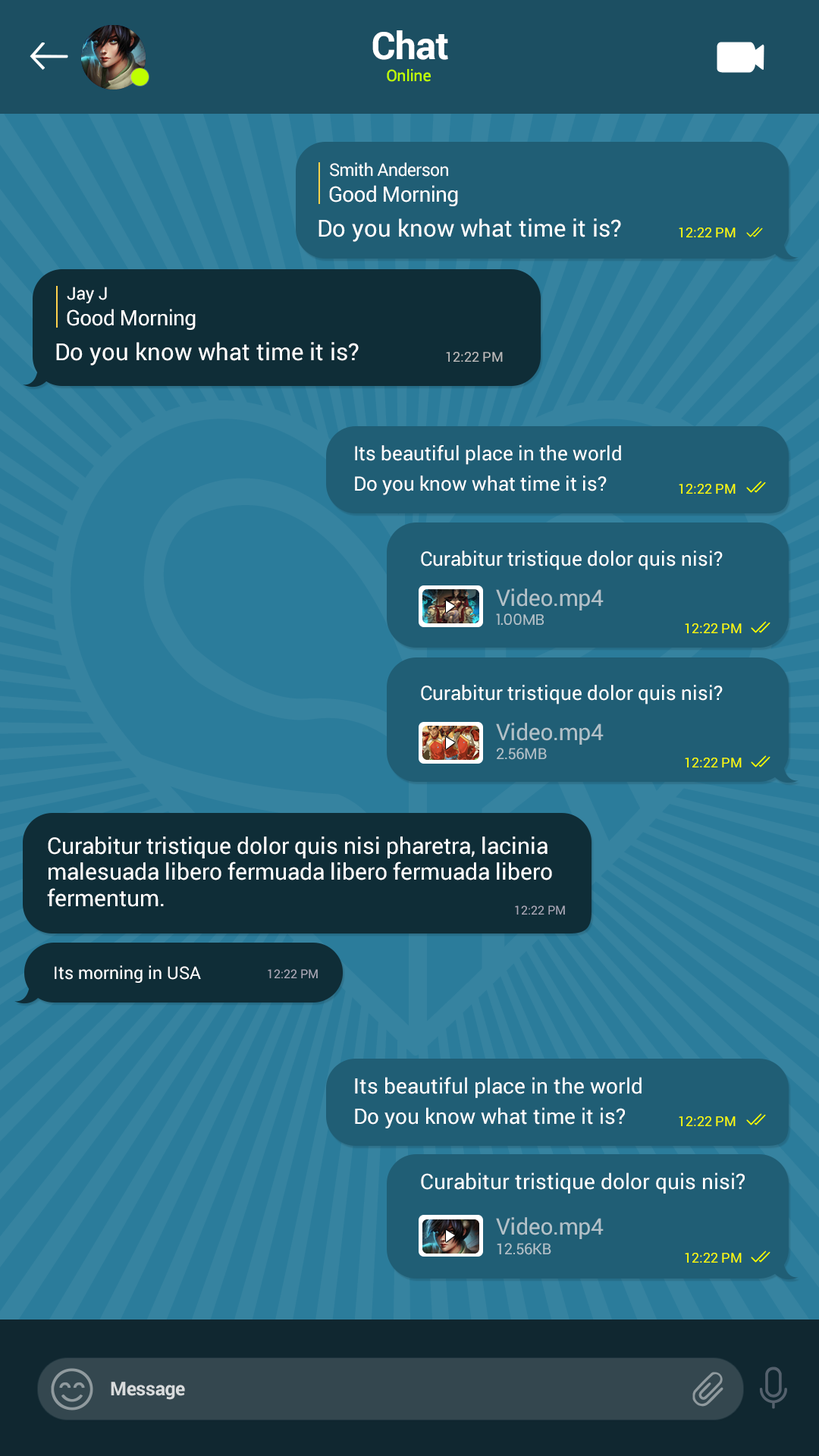
<style>
.page{position:relative;width:819px;height:1456px;background:#2b7c9b}
.page>*{position:absolute;margin:0}
.t1{font:37.9px "Roboto-Bold";letter-spacing:-0.013em;color:#ffffff}
.t2{font:15.9px "Roboto-Regular";color:#bfff00}
.t3{font:17.4px "Roboto-Regular";letter-spacing:-0.025em;color:#ffffff}
.t4{font:21.2px "Roboto-Regular";letter-spacing:-0.025em;color:#ffffff}
.t5{font:23.5px "Roboto-Regular";color:#ffffff}
.t6{font:13.6px "Roboto-Regular";color:#ffff00}
.t7{font:13.6px "Roboto-Regular";color:#bbbbbb}
.t8{font:19.7px "Roboto-Regular";color:#ffffff}
.t9{font:22.7px "Roboto-Regular";letter-spacing:-0.013em;color:#b2c1c8}
.t10{font:15.2px "Poppins-Regular";letter-spacing:-0.013em;color:#b2c1c8}
.t11{font:15.2px "Roboto-Regular";letter-spacing:-0.013em;color:#b2c1c8}
.t12{font:22.7px/26.2px "Roboto-Regular";color:#ffffff}
.t13{font:12.1px "Roboto-Regular";color:#a8a8b7}
.t14{font:17.4px "Roboto-Regular";color:#ffffff}
.t15{font:21.2px "Roboto-Regular";color:#ffffff}
.t16{font:19px "Roboto-Bold";letter-spacing:-0.013em;color:#d8dbdc}
</style>
<div class="page">
<p class="t1" style="left:372px;top:30px;width:76px;height:30px">Chat</p>
<p class="t2" style="left:387px;top:69px;width:44px;height:13px">Online</p>
<p class="t3" style="left:330px;top:162px;width:118px;height:15px">Smith Anderson</p>
<p class="t4" style="left:329px;top:185px;width:129px;height:21px">Good Morning</p>
<p class="t5" style="left:318px;top:218px;width:303px;height:24px">Do you know what time it is?</p>
<p class="t6" style="left:679px;top:227px;width:57px;height:10px">12:22 PM</p>
<p class="t3" style="left:67px;top:287px;width:40px;height:16px">Jay J</p>
<p class="t4" style="left:67px;top:309px;width:129px;height:21px">Good Morning</p>
<p class="t5" style="left:56px;top:342px;width:303px;height:24px">Do you know what time it is?</p>
<p class="t7" style="left:446px;top:352px;width:57px;height:10px">12:22 PM</p>
<p class="t8" style="left:355px;top:445px;width:266px;height:20px">Its beautiful place in the world</p>
<p class="t8" style="left:355px;top:475px;width:252px;height:20px">Do you know what time it is?</p>
<p class="t6" style="left:679px;top:484px;width:57px;height:10px">12:22 PM</p>
<p class="t8" style="left:421px;top:551px;width:302px;height:19px">Curabitur tristique dolor quis nisi?</p>
<p class="t9" style="left:496px;top:588px;width:108px;height:22px">Video.mp4</p>
<p class="t10" style="left:496px;top:613px;width:48px;height:12px">1.00MB</p>
<p class="t6" style="left:685px;top:623px;width:57px;height:10px">12:22 PM</p>
<p class="t8" style="left:421px;top:685px;width:302px;height:19px">Curabitur tristique dolor quis nisi?</p>
<p class="t9" style="left:496px;top:723px;width:108px;height:22px">Video.mp4</p>
<p class="t11" style="left:497px;top:748px;width:50px;height:12px">2.56MB</p>
<p class="t6" style="left:685px;top:758px;width:57px;height:9px">12:22 PM</p>
<p class="t12" style="left:47px;top:836px;width:505px;height:71px">Curabitur tristique dolor quis nisi pharetra, lacinia malesuada libero fermuada libero fermuada libero fermentum.</p>
<p class="t13" style="left:515px;top:905px;width:50px;height:10px">12:22 PM</p>
<p class="t14" style="left:55px;top:965px;width:146px;height:18px">Its morning in USA</p>
<p class="t13" style="left:268px;top:969px;width:50px;height:9px">12:22 PM</p>
<p class="t15" style="left:355px;top:1077px;width:287px;height:21px">Its beautiful place in the world</p>
<p class="t15" style="left:355px;top:1107px;width:270px;height:21px">Do you know what time it is?</p>
<p class="t6" style="left:679px;top:1116px;width:57px;height:10px">12:22 PM</p>
<p class="t15" style="left:421px;top:1172px;width:324px;height:22px">Curabitur tristique dolor quis nisi?</p>
<p class="t9" style="left:496px;top:1217px;width:108px;height:22px">Video.mp4</p>
<p class="t11" style="left:497px;top:1243px;width:54px;height:12px">12.56KB</p>
<p class="t6" style="left:685px;top:1253px;width:57px;height:10px">12:22 PM</p>
<p class="t16" style="left:111px;top:1382px;width:74px;height:18px">Message</p>
</div>
